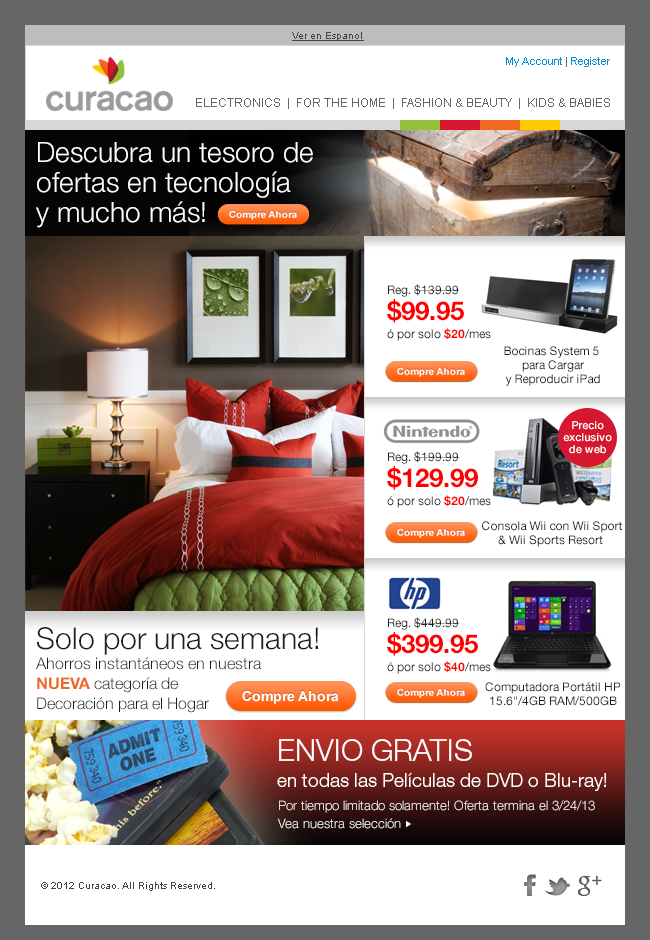
<style>
.page{position:relative;width:650px;height:940px;background:#ffffff}
.page>*{position:absolute;margin:0}
.t1{font:10px "ArialMT";color:#444444;text-decoration:underline}
.t2{font:11px "ArialMT";color:#008ecf}
.t3{font:11px "ArialMT";color:#666666}
.t4{font:12px "ArialMT";color:#666666}
.t5{font:28px/30px "HelveticaNeue-Light";color:#ffffff}
.t6{font:12px/18px "HelveticaNeue-Roman";color:#1e1e1e}
.t7{font:26px/26px "HelveticaNeue-Bold";color:#ff0000}
.t8{font:12px/18px "HelveticaNeue-Bold";color:#ff0000}
.t9{font:12px/14px "HelveticaNeue-Roman";color:#1e1e1e}
.t10{font:11px/12px "HelveticaNeue-Medium";color:#ffffff}
.t11{font:16px/20px "HelveticaNeue-Light";color:#1e1e1e}
.t12{font:30px/18px "HelveticaNeue-Light";color:#1e1e1e}
.t13{font:16px/20px "HelveticaNeue-Bold";color:#f26722}
.t14{font:19px/26px "HelveticaNeue-Light";color:#ffffff}
.t15{font:30px/32px "HelveticaNeue-Light";color:#ffffff}
.t16{font:13px/32px "HelveticaNeue-Light";color:#ffffff}
.t17{font:13px/18px "HelveticaNeue-Light";color:#ffffff}
.t18{font:10px "ArialMT";color:#444444}
</style>
<div class="page">
<p class="t1" style="left:292px;top:32px;width:72px;height:9px">Ver en Espanol</p>
<p class="t2" style="left:506px;top:57px;width:104px;height:10px">My Account<span class="t3"> | </span>Register</p>
<p class="t4" style="left:196px;top:98px;width:414px;height:11px">ELECTRONICS  |  FOR THE HOME  |  FASHION &amp; BEAUTY  |  KIDS &amp; BABIES</p>
<p class="t5" style="left:36px;top:142px;width:277px;height:86px">Descubra un tesoro de <br>ofertas en tecnología <br>y mucho más!</p>
<p class="t6" style="left:387px;top:284px;width:104px;height:57px">Reg. $139.99<br><span class="t7">$99.95<br></span>ó por solo <span class="t8">$20</span>/mes</p>
<p class="t9" style="left:504px;top:346px;width:96px;height:40px;text-align:center">Bocinas System 5 <br>para Cargar<br>y Reproducir iPad</p>
<p class="t10" style="left:563px;top:421px;width:49px;height:33px;text-align:center">Precio exclusivo de web</p>
<p class="t6" style="left:387px;top:451px;width:104px;height:57px">Reg. $199.99<br><span class="t7">$129.99<br></span>ó por solo <span class="t8">$20</span>/mes</p>
<p class="t9" style="left:482px;top:521px;width:140px;height:26px;text-align:center">Consola Wii con Wii Sport<br>&amp; Wii Sports Resort</p>
<p class="t6" style="left:387px;top:617px;width:104px;height:57px">Reg. $449.99<br><span class="t7">$399.95<br></span>ó por solo <span class="t8">$40</span>/mes</p>
<p class="t11" style="left:36px;top:627px;width:282px;height:86px"><span class="t12">Solo por una semana!<br></span>Ahorros instantáneos en nuestra <br><span class="t13">NUEVA </span>categoría de <br>Decoración para el Hogar</p>
<p class="t9" style="left:485px;top:682px;width:136px;height:24px;text-align:center">Computadora Portátil HP<br>15.6"/4GB RAM/500GB</p>
<p class="t14" style="left:277px;top:739px;width:329px;height:52px"><span class="t15">ENVIO GRATIS<br></span>en todas las Películas de DVD o Blu-ray!</p>
<p class="t16" style="left:277px;top:800px;width:318px;height:29px">Por tiempo limitado solamente! Oferta termina el 3/24/13<br><span class="t17">Vea nuestra selección</span></p>
<p class="t18" style="left:41px;top:882px;width:174px;height:9px">© 2012 Curacao. All Rights Reserved.</p>
</div>
